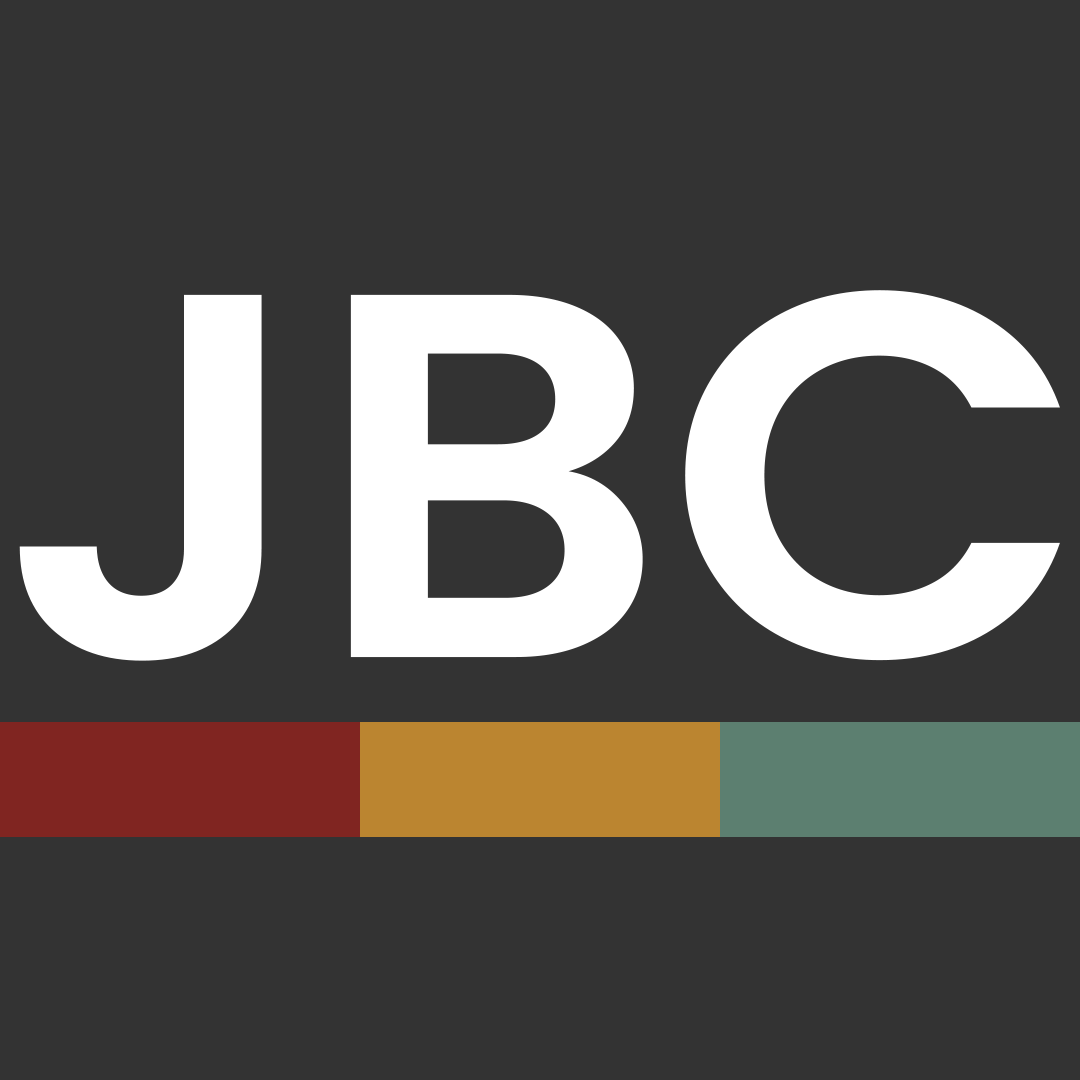
<style>
.page{position:relative;width:1080px;height:1080px;background:#333333}
.page>*{position:absolute;margin:0}
.t1{font:518.8px "Poppins-SemiBold";color:#ffffff;text-transform:uppercase;scale:1.06 1}
</style>
<div class="page">
<p class="t1" style="left:19px;top:290px;width:1041px;height:371px">JBC</p>
</div>
